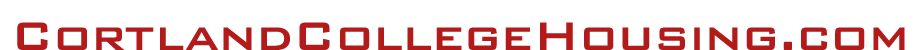
<style>
.page{position:relative;width:920px;height:50px;background:#ffffff}
.page>*{position:absolute;margin:0}
.t1{font:53px "BankGothicBold";color:#b31b1b}
</style>
<div class="page">
<p class="t1" style="left:17px;top:22px;width:888px;height:28px">CortlandCollegeHousing.com</p>
</div>
